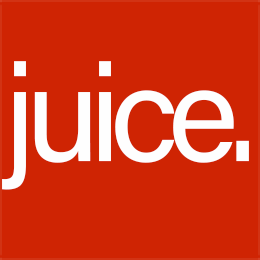
<style>
.page{position:relative;width:260px;height:260px;background:#cf2403}
.page>*{position:absolute;margin:0}
.t1{font:135.9px "AcuminConcept-Regular";letter-spacing:-0.08em;color:#fefefe}
</style>
<div class="page">
<p class="t1" style="left:2px;top:61px;width:247px;height:129px">juice.</p>
</div>
